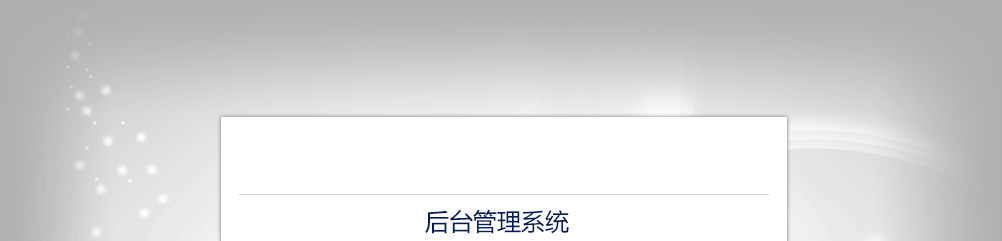
<style>
.page{position:relative;width:1002px;height:241px;background:#ffffff}
.page>*{position:absolute;margin:0}
.t1{font:24px "MicrosoftYaHei";color:#001c58}
</style>
<div class="page">
<p class="t1" style="left:425px;top:209px;width:144px;height:25px">后台管理系统</p>
</div>
